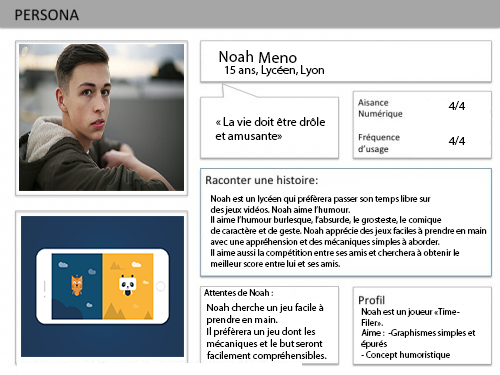
<style>
.page{position:relative;width:500px;height:375px;background:#ffffff}
.page>*{position:absolute;margin:0}
.t1{font:16px "MyriadPro-Regular";color:#000000}
.t2{font:12px "MyriadPro-Regular";color:#000000}
.t3{font:9px "MyriadPro-Regular";color:#000000}
.t4{font:10px "MyriadPro-Regular";color:#000000}
</style>
<div class="page">
<p class="t1" style="left:219px;top:50px;width:34px;height:12px">Noah</p>
<p class="t1" style="left:259px;top:52px;width:38px;height:11px">Meno</p>
<p class="t2" style="left:225px;top:65px;width:99px;height:12px">15 ans, Lycéen, Lyon</p>
<p class="t2" style="left:448px;top:101px;width:18px;height:9px">4/4</p>
<p class="t2" style="left:215px;top:117px;width:110px;height:23px">« La vie doit être drôle <br>et amusante»</p>
<p class="t2" style="left:448px;top:136px;width:18px;height:9px">4/4</p>
<p class="t3" style="left:210px;top:195px;width:277px;height:72px">Noah est un lycéen qui préfèrera passer son temps libre sur<br>des jeux vidéos. Noah aime l’humour.<br>Il aime l’humour burlesque, l’absurde, le grosteste, le comique<br>de caractère et de geste. Noah apprécie des jeux faciles à prendre en main <br>avec une appréhension et des mécaniques simples à aborder.<br>Il aime aussi la compétition entre ses amis et cherchera à obtenir le <br>meilleur score entre lui et ses amis.</p>
<p class="t3" style="left:204px;top:289px;width:69px;height:7px">Attentes de Noah :</p>
<p class="t4" style="left:207px;top:303px;width:120px;height:58px">Noah cherche un jeu facile à <br>prendre en main.<br>Il préfèrera un jeu dont les <br>mécaniques et le but seront<br>facilement compréhensibles.</p>
<p class="t3" style="left:361px;top:308px;width:115px;height:52px">Noah est un joueur «Time-<br>Filer».<br>Aime :  -Graphismes simples et<br>épurés<br>- Concept humoristique</p>
</div>
